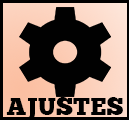
<style>
.page{position:relative;width:129px;height:120px;background:#010101}
.page>*{position:absolute;margin:0}
.t1{font:24.8px "ChunkFiveEx";color:#000000}
</style>
<div class="page">
<p class="t1" style="left:6px;top:97px;width:117px;height:23px">AJUSTES</p>
</div>
